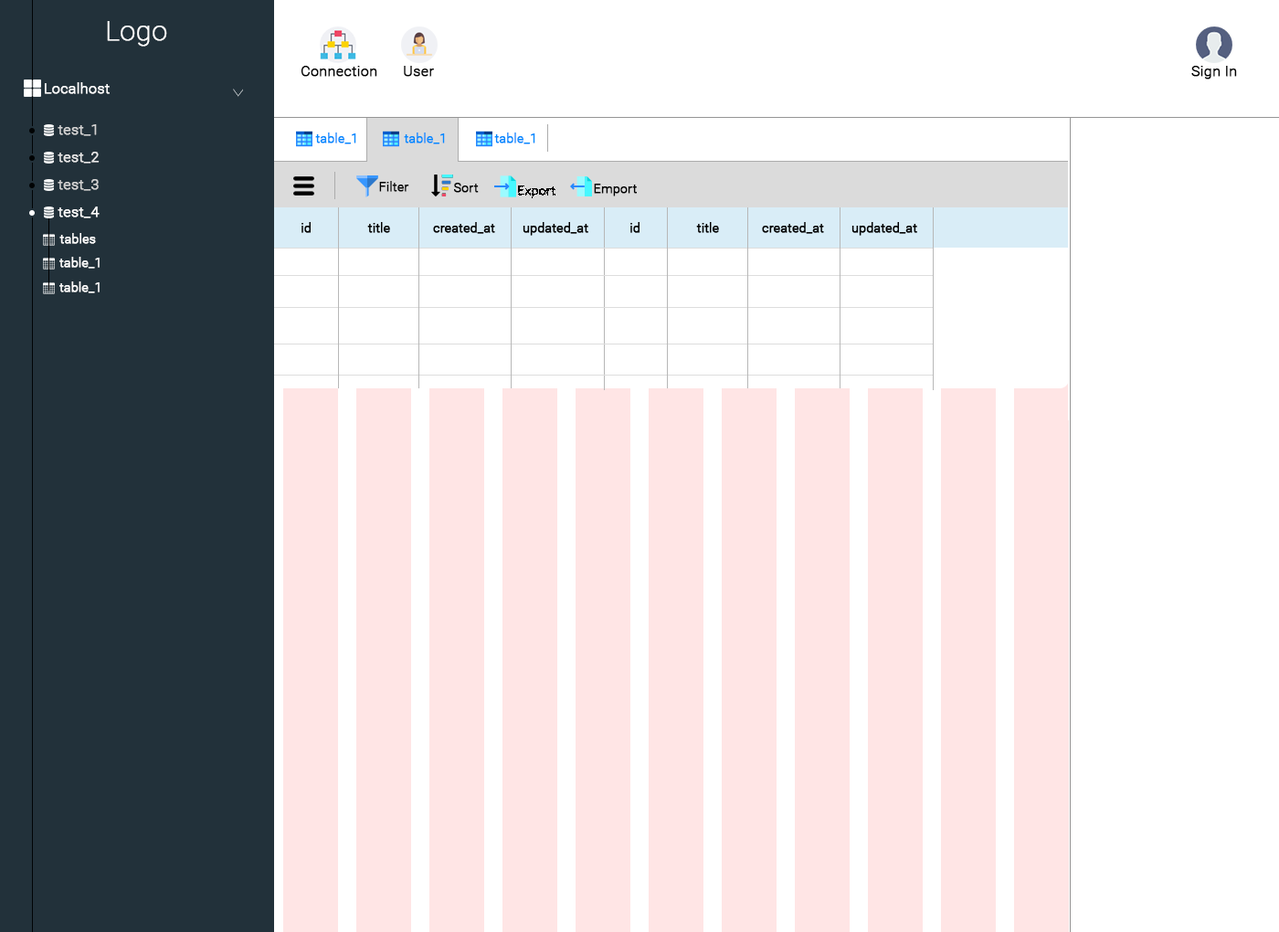
<style>
.page{position:relative;width:1279px;height:932px;background:#ffffff}
.page>*{position:absolute;margin:0}
.t1{font:27.4px "Roboto-Thin";color:#ffffff;font-weight:bold}
.t2{font:14.6px "Roboto-Light";color:#000000;font-weight:bold}
.t3{font:14.6px "Roboto-Light";color:#ffffff;font-weight:bold}
.t4{font:14.6px "Roboto-Light";color:#d2d2d2;font-weight:bold}
.t5{font:12.8px "Roboto-Light";color:#008aff;font-weight:bold}
.t6{font:14.6px "Roboto-Light";color:#e8e8e8;font-weight:bold}
.t7{font:12.8px "Roboto-Light";color:#000000;font-weight:bold}
.t8{font:12.8px "Roboto-Light";color:#ffffff;font-weight:bold}
</style>
<div class="page">
<p class="t1" style="left:107px;top:21px;width:60px;height:26px">Logo</p>
<p class="t2" style="left:301px;top:66px;width:76px;height:11px">Connection</p>
<p class="t2" style="left:404px;top:66px;width:30px;height:11px">User</p>
<p class="t2" style="left:1192px;top:66px;width:45px;height:14px">Sign In</p>
<p class="t3" style="left:45px;top:82px;width:65px;height:12px">Localhost</p>
<p class="t4" style="left:58px;top:124px;width:39px;height:12px">test_1</p>
<p class="t5" style="left:315px;top:133px;width:41px;height:11px">table_1</p>
<p class="t5" style="left:404px;top:133px;width:41px;height:11px">table_1</p>
<p class="t5" style="left:494px;top:133px;width:41px;height:11px">table_1</p>
<p class="t6" style="left:58px;top:152px;width:42px;height:12px">test_2</p>
<p class="t4" style="left:58px;top:179px;width:41px;height:12px">test_3</p>
<p class="t7" style="left:379px;top:181px;width:30px;height:11px">Filter</p>
<p class="t7" style="left:454px;top:183px;width:25px;height:10px">Sort</p>
<p class="t7" style="left:518px;top:186px;width:38px;height:12px">Export</p>
<p class="t7" style="left:594px;top:184px;width:43px;height:12px">Emport</p>
<p class="t3" style="left:58px;top:207px;width:42px;height:11px">test_4</p>
<p class="t8" style="left:59px;top:233px;width:37px;height:11px">tables</p>
<p class="t7" style="left:302px;top:222px;width:9px;height:11px">id</p>
<p class="t7" style="left:367px;top:222px;width:23px;height:11px">title</p>
<p class="t7" style="left:433px;top:222px;width:62px;height:12px">created_at</p>
<p class="t7" style="left:523px;top:222px;width:65px;height:14px">updated_at</p>
<p class="t7" style="left:631px;top:222px;width:9px;height:11px">id</p>
<p class="t7" style="left:696px;top:222px;width:23px;height:11px">title</p>
<p class="t7" style="left:762px;top:222px;width:62px;height:12px">created_at</p>
<p class="t7" style="left:852px;top:222px;width:65px;height:14px">updated_at</p>
<p class="t8" style="left:59px;top:257px;width:41px;height:12px">table_1</p>
<p class="t8" style="left:59px;top:281px;width:41px;height:12px">table_1</p>
</div>
